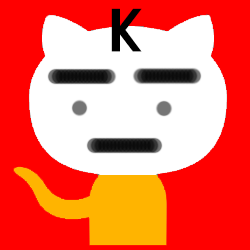
<style>
.page{position:relative;width:250px;height:250px;background:#ff0000}
.page>*{position:absolute;margin:0}
.t1{font:49.9px "BMDoHyeon";color:#000000}
</style>
<div class="page">
<p class="t1" style="left:111px;top:8px;width:31px;height:44px">K</p>
</div>
